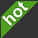
<style>
.page{position:relative;width:38px;height:38px;background:#333333}
.page>*{position:absolute;margin:0}
.t1{font:17px "Arial-BoldMT";color:#ffffff}
</style>
<div class="page">
<p class="t1" style="left:2px;top:1px;width:27px;height:25px;rotate:-45deg">hot</p>
</div>
